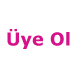
<style>
.page{position:relative;width:75px;height:75px;background:#ffffff}
.page>*{position:absolute;margin:0}
.t1{font:17.7px "Verdana-Bold";color:#d51289}
</style>
<div class="page">
<p class="t1" style="left:7px;top:29px;width:63px;height:20px">Üye Ol</p>
</div>
